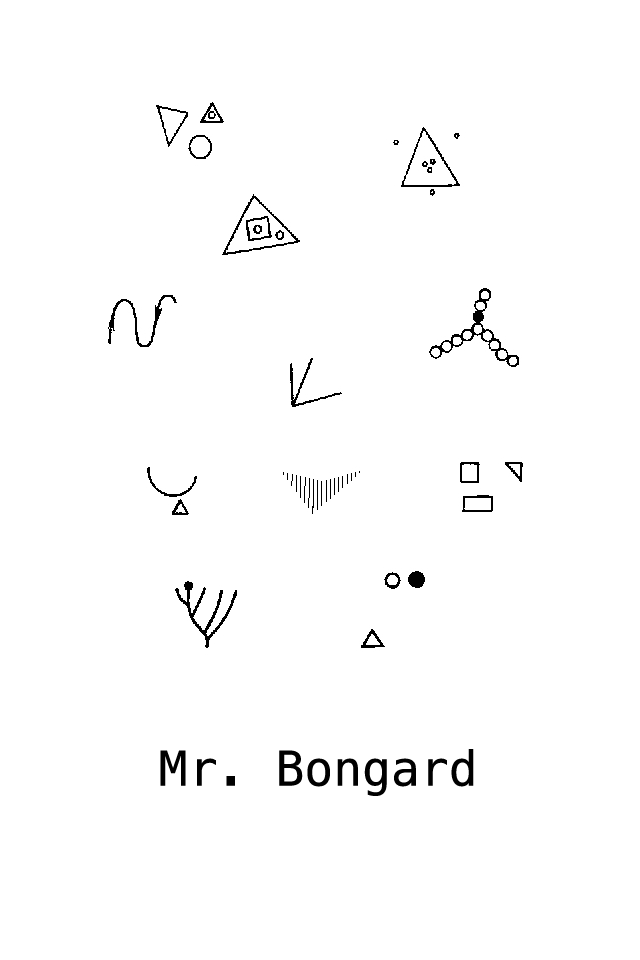
<style>
.page{position:relative;width:640px;height:960px;background:#ffffff}
.page>*{position:absolute;margin:0}
.t1{font:48px "Menlo-Regular";color:#000000}
</style>
<div class="page">
<p class="t1" style="left:160px;top:749px;width:314px;height:47px">Mr. Bongard</p>
</div>
